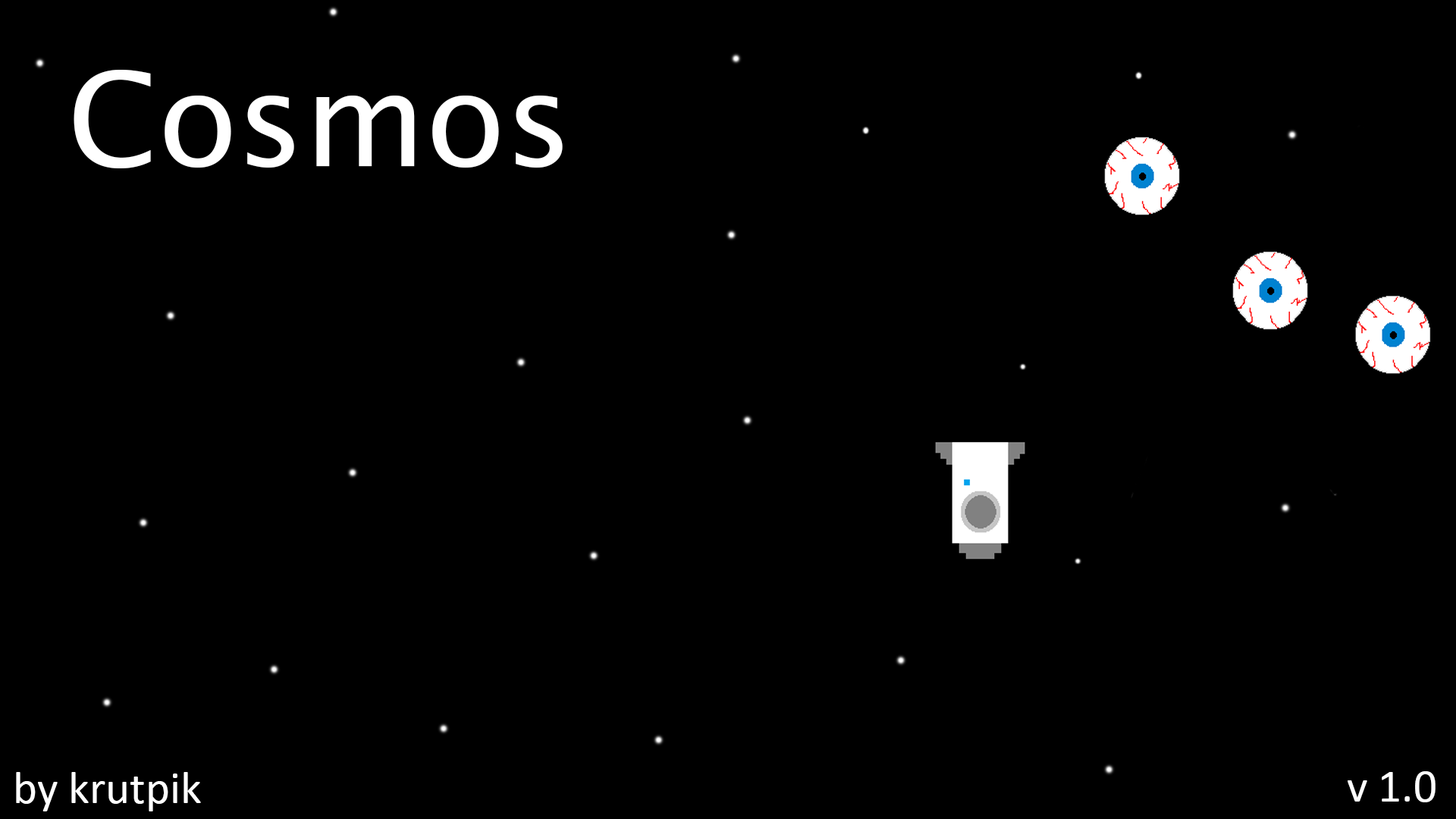
<style>
.page{position:relative;width:1456px;height:819px;background:#000000}
.page>*{position:absolute;margin:0}
.t1{font:130.3px "LucidaSansUnicode";color:#ffffff}
.t2{font:46.3px "Calibri";color:#ffffff}
</style>
<div class="page">
<p class="t1" style="left:74px;top:70px;width:489px;height:98px">Cosmos</p>
<p class="t2" style="left:16px;top:772px;width:185px;height:39px">by krutpik</p>
<p class="t2" style="left:1348px;top:771px;width:88px;height:31px">v 1.0</p>
</div>
